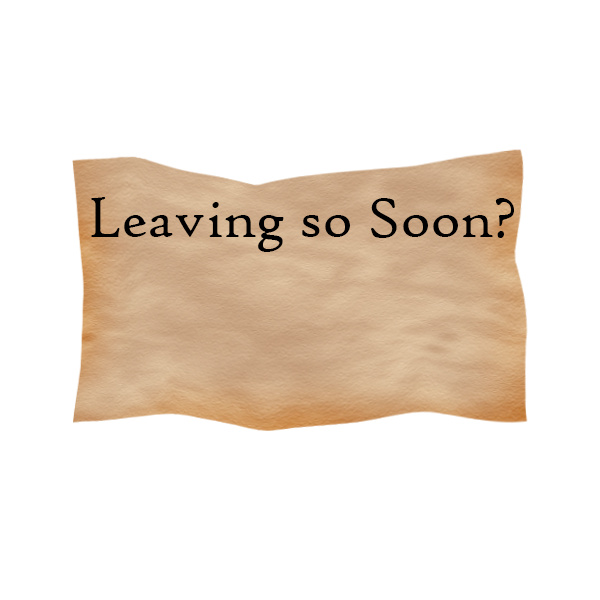
<style>
.page{position:relative;width:600px;height:600px;background:#ffffff}
.page>*{position:absolute;margin:0}
.t1{font:59.2px "HighTowerText-Reg";color:#000000}
</style>
<div class="page">
<p class="t1" style="left:91px;top:197px;width:423px;height:55px">Leaving so Soon?</p>
</div>
